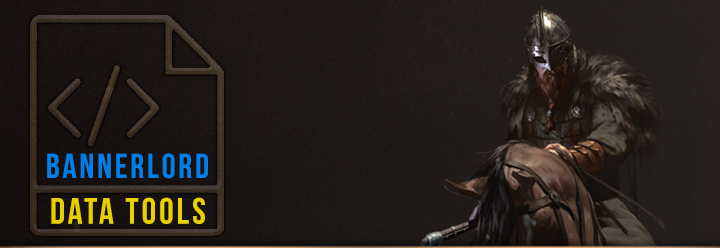
<style>
.page{position:relative;width:720px;height:248px}
.page>*{position:absolute;margin:0}
.t1{font:34.7px "BebasNeueBold";letter-spacing:0.08em;color:#008aff}
.t2{font:36.8px "BebasNeueBold";letter-spacing:0.08em;color:#ffe400}
</style>
<div class="page">
<p class="t1" style="left:47px;top:153px;width:161px;height:26px">Bannerlord</p>
<p class="t2" style="left:51px;top:197px;width:154px;height:27px"><span class="t1"><br></span>Data Tools</p>
</div>
